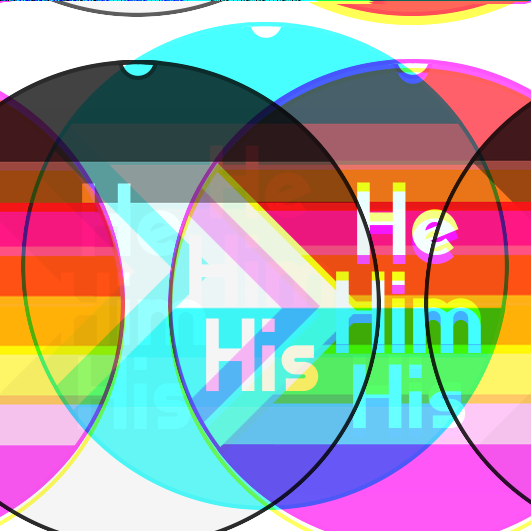
<style>
.page{position:relative;width:531px;height:531px}
.page>*{position:absolute;margin:0}
.t1{font:103.7px "GilbertBoldPreview4"}
</style>
<div class="page">
<p class="t1" style="left:189px;top:233px;width:145px;height:74px">Him</p>
<p class="t1" style="left:206px;top:317px;width:113px;height:74px">His</p>
</div>
